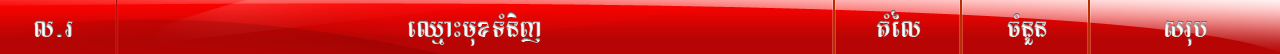
<style>
.page{position:relative;width:1280px;height:54px}
.page>*{position:absolute;margin:0}
.t1{font:45.3px "LimonF2"}
</style>
<div class="page">
<p class="t1" style="left:408px;top:12px;width:133px;height:34px">eQµaHmuxTMnij</p>
<p class="t1" style="left:876px;top:10px;width:45px;height:27px">tMél</p>
<p class="t1" style="left:1007px;top:13px;width:40px;height:32px">cMnYn</p>
<p class="t1" style="left:34px;top:20px;width:39px;height:17px">l&gt;r</p>
<p class="t1" style="left:1164px;top:20px;width:43px;height:26px">srub</p>
</div>
